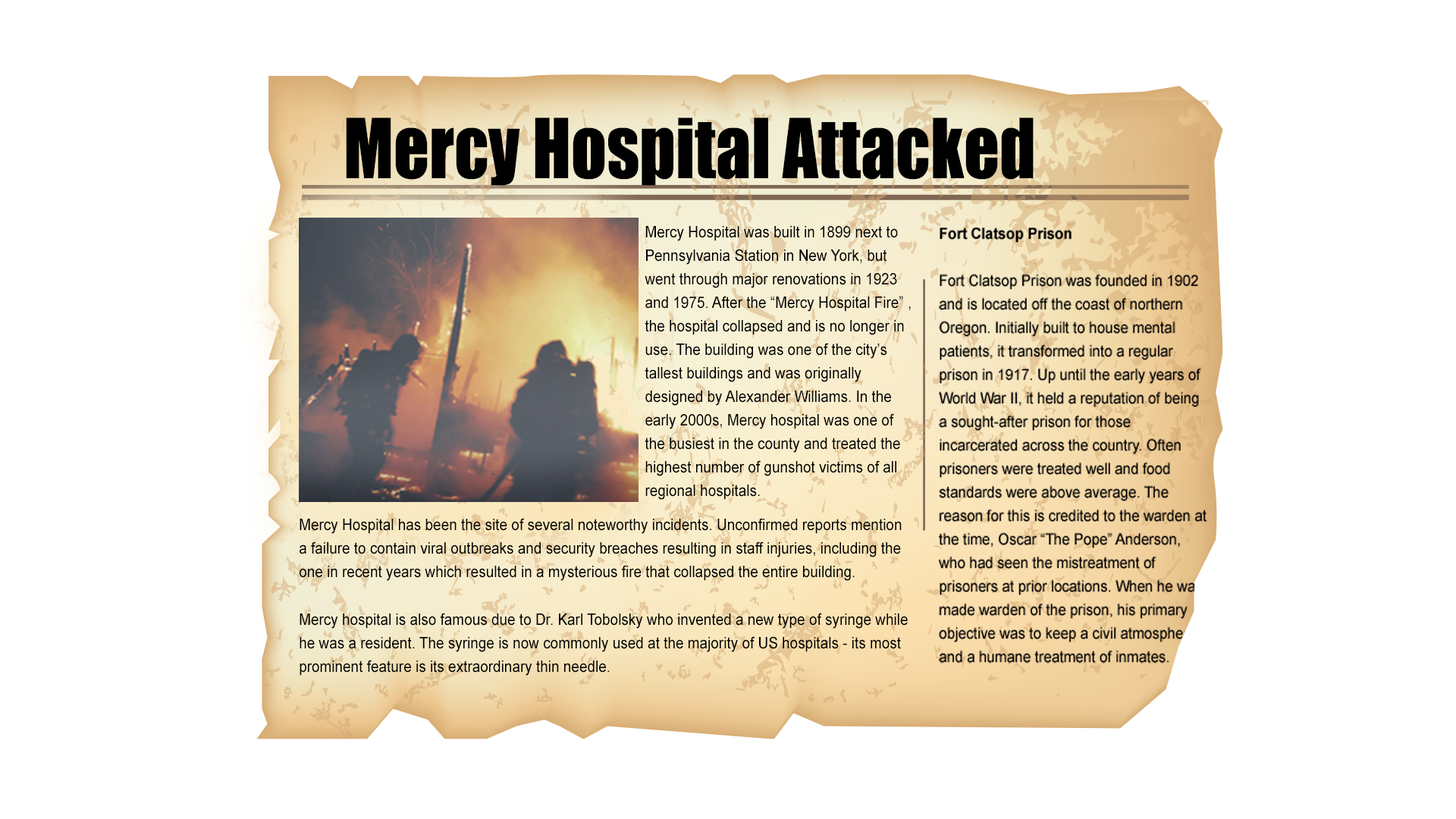
<style>
.page{position:relative;width:1456px;height:819px;background:#ffffff}
.page>*{position:absolute;margin:0}
.t1{font:76.3px "Impact";color:#000000;scale:0.91 1}
.t2{font:15.7px/23.5px "ArialMT";color:#000000;scale:0.91 1}
</style>
<div class="page">
<p class="t1" style="left:346px;top:118px;width:688px;height:68px">Mercy Hospital Attacked</p>
<p class="t2" style="left:645px;top:226px;width:266px;height:274px">Mercy Hospital was built in 1899 next to Pennsylvania Station in New York, but went through major renovations in 1923 and 1975. After the “Mercy Hospital Fire” , the hospital collapsed and is no longer in use. The building was one of the city’s tallest buildings and was originally designed by Alexander Williams. In the early 2000s, Mercy hospital was one of the busiest in the county and treated the highest number of gunshot victims of all regional hospitals.</p>
<p class="t2" style="left:300px;top:518px;width:608px;height:158px">Mercy Hospital has been the site of several noteworthy incidents. Unconfirmed reports mention a failure to contain viral outbreaks and security breaches resulting in staff injuries, including the one in recent years which resulted in a mysterious fire that collapsed the entire building.<br><br>Mercy hospital is also famous due to Dr. Karl Tobolsky who invented a new type of syringe while he was a resident. The syringe is now commonly used at the majority of US hospitals - its most prominent feature is its extraordinary thin needle.</p>
</div>
